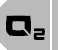
<style>
.page{position:relative;width:58px;height:50px;background:#bababa}
.page>*{position:absolute;margin:0}
.t1{font:30px "Reconstruct";color:#000000;scale:0.9 1}
.t2{font:17.2px "Reconstruct";color:#000000;scale:0.7 1}
</style>
<div class="page">
<p class="t1" style="left:6px;top:15px;width:25px;height:21px">O</p>
<p class="t2" style="left:33px;top:28px;width:12px;height:12px">2</p>
</div>
